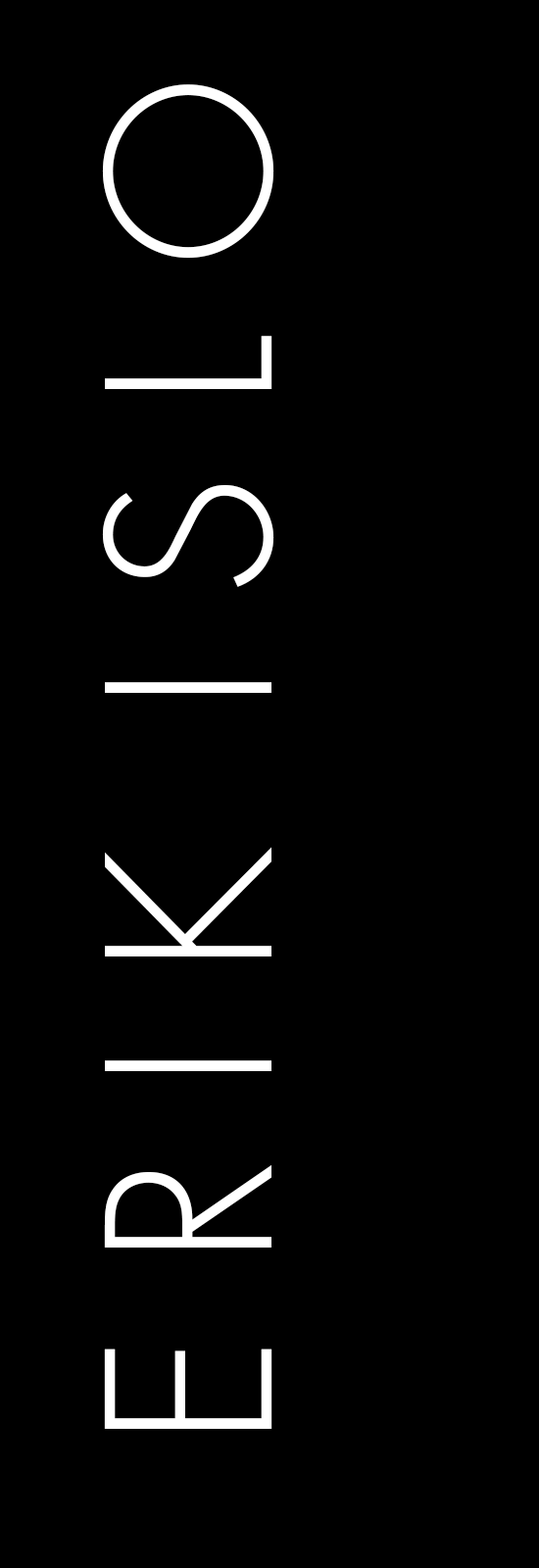
<style>
.page{position:relative;width:539px;height:1568px;background:#000000}
.page>*{position:absolute;margin:0}
.t1{font:221.1px "Futura-Light";color:#ffffff}
</style>
<div class="page">
<p class="t1" style="left:102px;top:84px;width:172px;height:1345px;rotate:-90deg">E R I K  I S L O</p>
</div>
